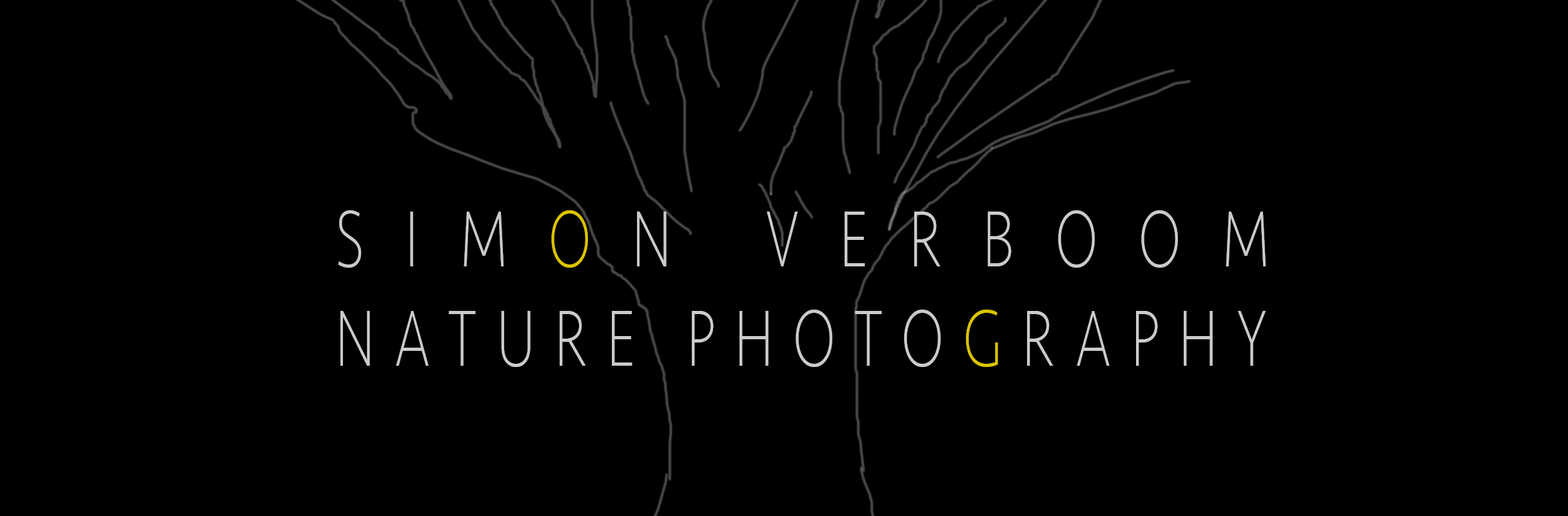
<style>
.page{position:relative;width:1568px;height:516px;background:#000000}
.page>*{position:absolute;margin:0}
.t1{font:82.5px "Seravek-ExtraLight";letter-spacing:0.34em;color:#cbcbcb;scale:0.7 1}
.t2{font:82.5px "Seravek-ExtraLight";letter-spacing:0.713em;color:#cbcbcb;scale:0.7 1}
.t3{font:82.5px "Seravek-ExtraLight";letter-spacing:0.713em;color:#dbc400;scale:0.7 1}
.t4{font:82.5px "Seravek-ExtraLight";letter-spacing:0.34em;color:#dbc400;scale:0.7 1}
</style>
<div class="page">
<p class="t1" style="left:338px;top:210px;width:928px;height:157px"><span class="t2">SIM</span><span class="t3">O</span><span class="t2">N VERBOOM<br></span>NATURE PHOTO<span class="t4">G</span>RAPHY</p>
</div>
